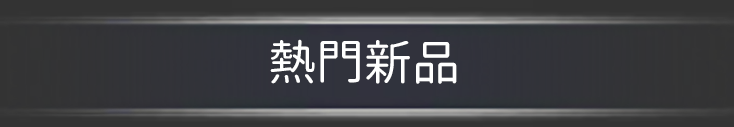
<style>
.page{position:relative;width:734px;height:127px}
.page>*{position:absolute;margin:0}
.t1{font:48px "GenJyuuGothic-P-Regular";color:#ffffff}
</style>
<div class="page">
<p class="t1" style="left:270px;top:39px;width:187px;height:45px">熱門新品</p>
</div>
